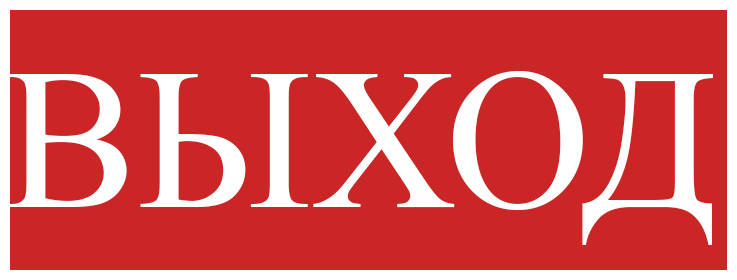
<style>
.page{position:relative;width:737px;height:280px;background:#ca2626}
.page>*{position:absolute;margin:0}
.t1{font:200px "TimesNewRomanPSMT";color:#ffffff}
</style>
<div class="page">
<p class="t1" style="left:7px;top:71px;width:706px;height:174px">ВЫХОД</p>
</div>
